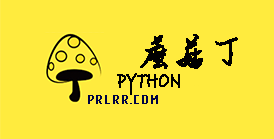
<style>
.page{position:relative;width:274px;height:139px;background:#ffeb3e}
.page>*{position:absolute;margin:0}
.t1{font:42.3px "FENGHJD";letter-spacing:-0.02em;color:#000000;text-transform:uppercase;font-weight:bold;scale:0.85 1}
.t2{font:22.6px "BradleyHandITC";letter-spacing:-0.02em;color:#000000;text-transform:uppercase;font-weight:bold;scale:0.68 1}
.t3{font:13.5px "GENISO";letter-spacing:-0.02em;color:#000344;text-transform:uppercase;font-weight:bold;scale:1.1 1}
</style>
<div class="page">
<p class="t1" style="left:140px;top:34px;width:98px;height:35px">蘑菇丁</p>
<p class="t2" style="left:117px;top:73px;width:63px;height:22px">python</p>
<p class="t3" style="left:88px;top:95px;width:70px;height:9px">prlrr.com</p>
</div>
